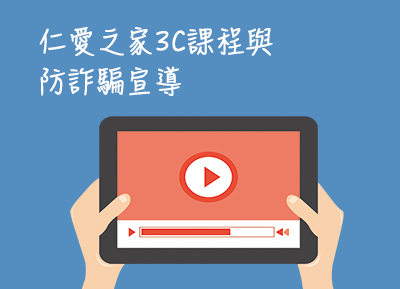
<style>
.page{position:relative;width:400px;height:289px;background:#548ec0}
.page>*{position:absolute;margin:0}
.t1{font:27.5px "HanziPenTC-W3";color:#ffffff;font-variant:small-caps;font-weight:bold}
</style>
<div class="page">
<p class="t1" style="left:39px;top:27px;width:234px;height:69px">仁愛之家3C課程與<br>防詐騙宣導</p>
</div>
